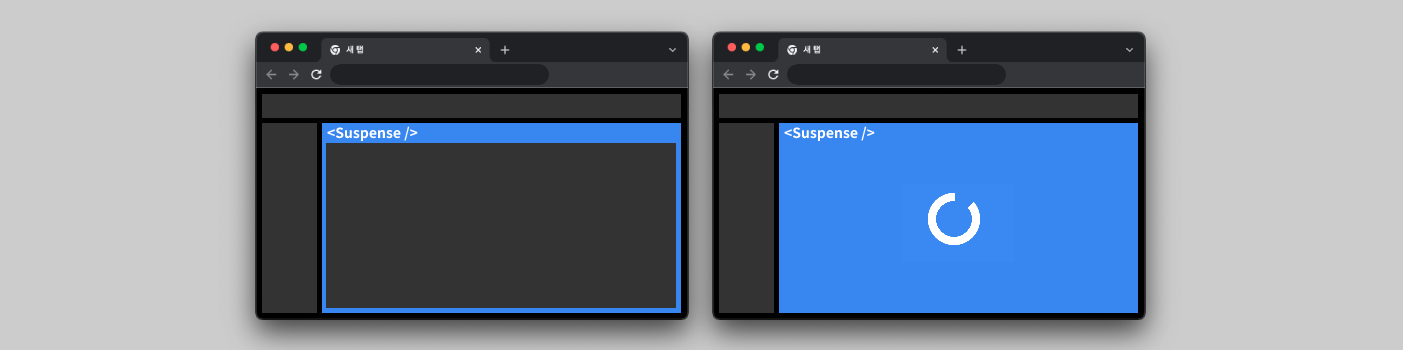
<style>
.page{position:relative;width:1403px;height:350px;background:#cccccc}
.page>*{position:absolute;margin:0}
.t1{font:14px "NotoSansKR-Bold";color:#ffffff}
</style>
<div class="page">
<p class="t1" style="left:327px;top:126px;width:91px;height:16px">&lt;Suspense /&gt;</p>
<p class="t1" style="left:784px;top:126px;width:91px;height:16px">&lt;Suspense /&gt;</p>
</div>
